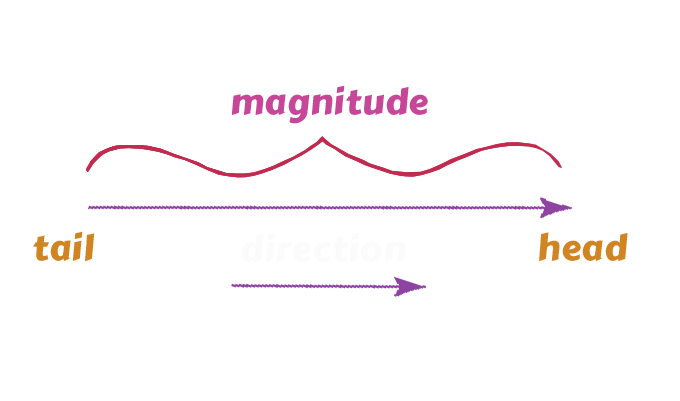
<style>
.page{position:relative;width:680px;height:401px;background:#ffffff}
.page>*{position:absolute;margin:0}
.t1{font:35.6px "CarterOne";letter-spacing:0.02em;color:#c64697}
.t2{font:35.6px "CarterOne";letter-spacing:0.02em;color:#d18522}
</style>
<div class="page">
<p class="t1" style="left:231px;top:85px;width:197px;height:39px">magnitude</p>
<p class="t2" style="left:33px;top:231px;width:62px;height:30px">tail</p>
<p class="t2" style="left:539px;top:232px;width:89px;height:29px">head</p>
</div>
